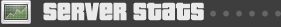
<style>
.page{position:relative;width:281px;height:27px;background:#3e3e3e}
.page>*{position:absolute;margin:0}
.t1{font:27px "PricedownBl-Regular";color:#eaeaea}
</style>
<div class="page">
<p class="t1" style="left:43px;top:2px;width:161px;height:19px">Server stats</p>
</div>
